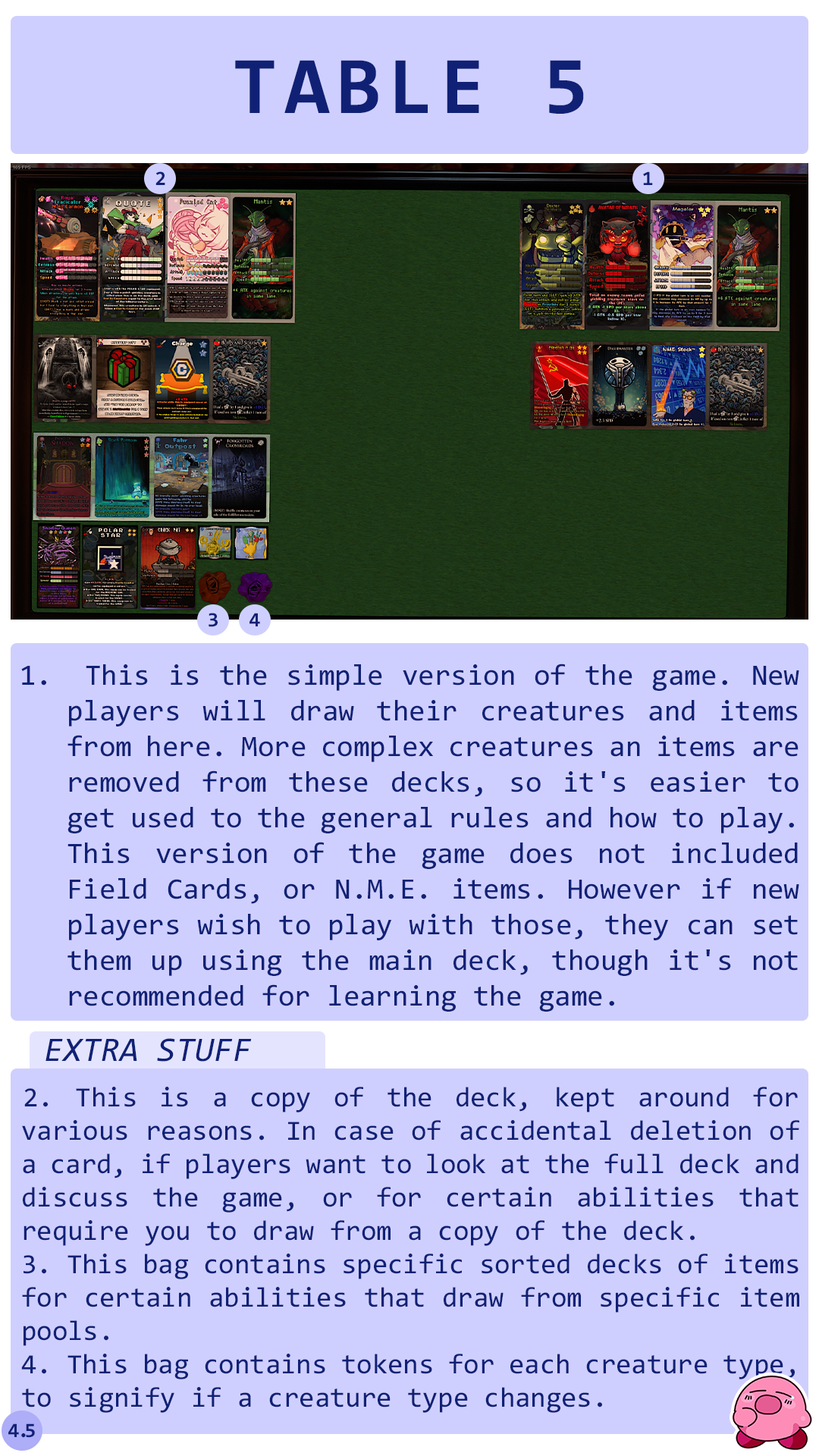
<style>
.page{position:relative;width:819px;height:1456px;background:#cfcfff}
.page>*{position:absolute;margin:0}
.t1{font:82.2px "Consolas-Bold";letter-spacing:0.08em;color:#102175}
.t2{font:20.5px "Consolas-Bold";color:#102175}
.t3{font:20.6px "Consolas-Bold";color:#102175}
.t4{font:29.6px/35.6px "Consolas";color:#102175}
.t5{font:34.3px "Consolas-Italic";color:#102175}
.t6{font:28.1px/33.4px "Consolas";color:#102175}
.t7{font:20.5px "Consolas-Bold";letter-spacing:-0.06em;color:#102175}
.t8{font:20.5px "Consolas-Bold";letter-spacing:-0.22em;color:#102175}
</style>
<div class="page">
<p class="t1" style="left:235px;top:60px;width:349px;height:54px">TABLE 5</p>
<p class="t2" style="left:155px;top:171px;width:10px;height:14px">2</p>
<p class="t2" style="left:643px;top:171px;width:10px;height:14px">1</p>
<p class="t3" style="left:209px;top:613px;width:9px;height:14px">3</p>
<p class="t3" style="left:249px;top:613px;width:11px;height:13px">4</p>
<p class="t4" style="left:21px;top:664px;width:778px;height:348px;text-align:justify">This is the simple version of the game. New players will draw their creatures and items from here. More complex creatures an items are removed from these decks, so it's easier to get used to the general rules and how to play. This version of the game does not included Field Cards, or N.M.E. items. However if new players wish to play with those, they can set them up using the main deck, though it's not recommended for learning the game.</p>
<p class="t5" style="left:45px;top:1038px;width:207px;height:24px">EXTRA STUFF</p>
<p class="t6" style="left:21px;top:1087px;width:778px;height:326px;text-align:justify">2. This is a copy of the deck, kept around for various reasons. In case of accidental deletion of a card, if players want to look at the full deck and discuss the game, or for certain abilities that require you to draw from a copy of the deck.<br>3. This bag contains specific sorted decks of items  for certain abilities that draw from specific item pools. <br>4. This bag contains tokens for each creature type, to signify if a creature type changes.</p>
<p class="t7" style="left:8px;top:1423px;width:27px;height:15px">4<span class="t8">.</span>5</p>
</div>
